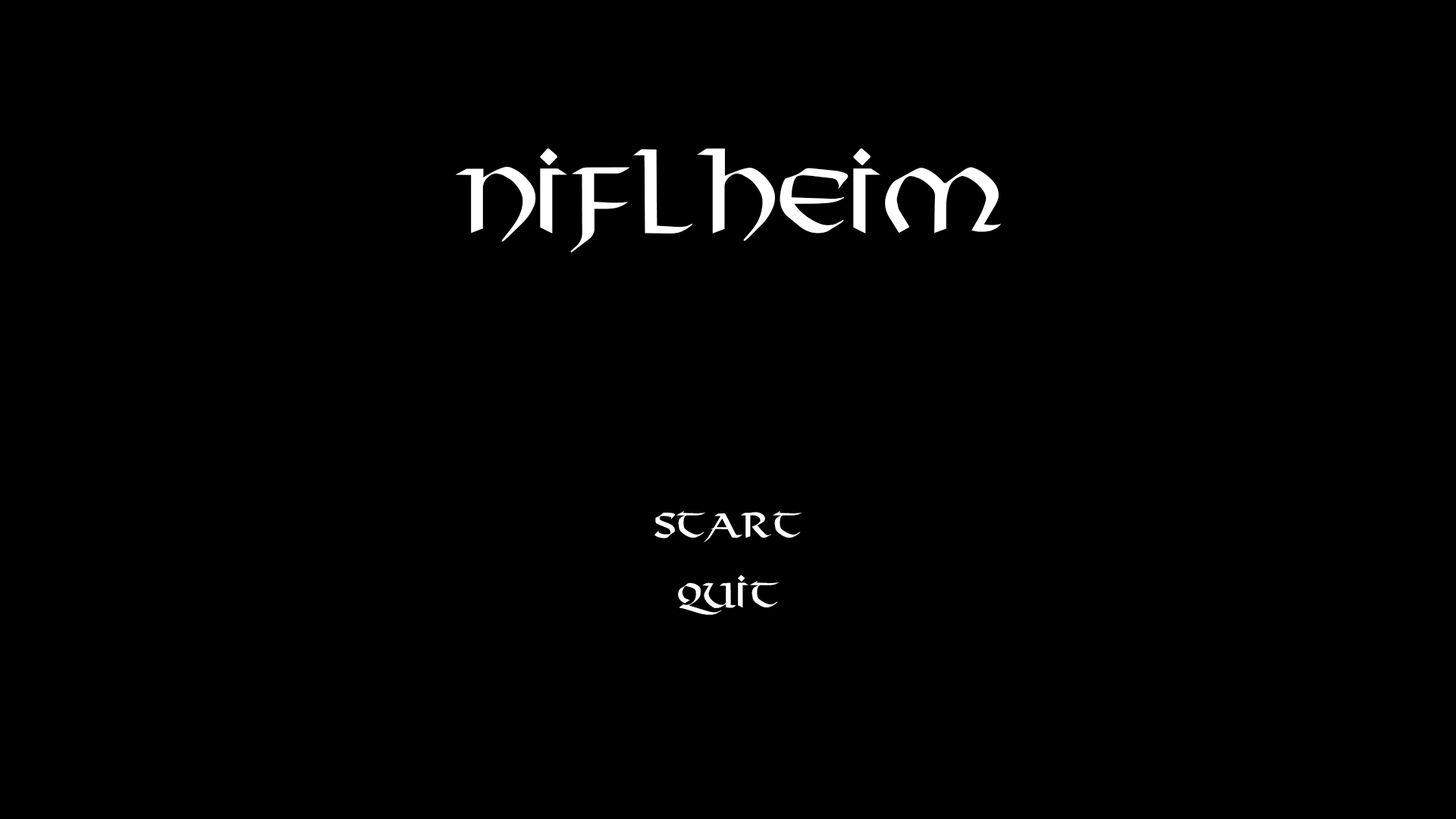
<style>
.page{position:relative;width:1456px;height:819px;background:#000000}
.page>*{position:absolute;margin:0}
.t1{font:87.1px "Viking-Normal";color:#ffffff}
.t2{font:33.4px "Viking-Normal";color:#ffffff}
</style>
<div class="page">
<p class="t1" style="left:455px;top:148px;width:546px;height:105px">NIFLHEIM</p>
<p class="t2" style="left:654px;top:511px;width:148px;height:32px">Start</p>
<p class="t2" style="left:678px;top:575px;width:102px;height:40px">QUIT</p>
</div>
